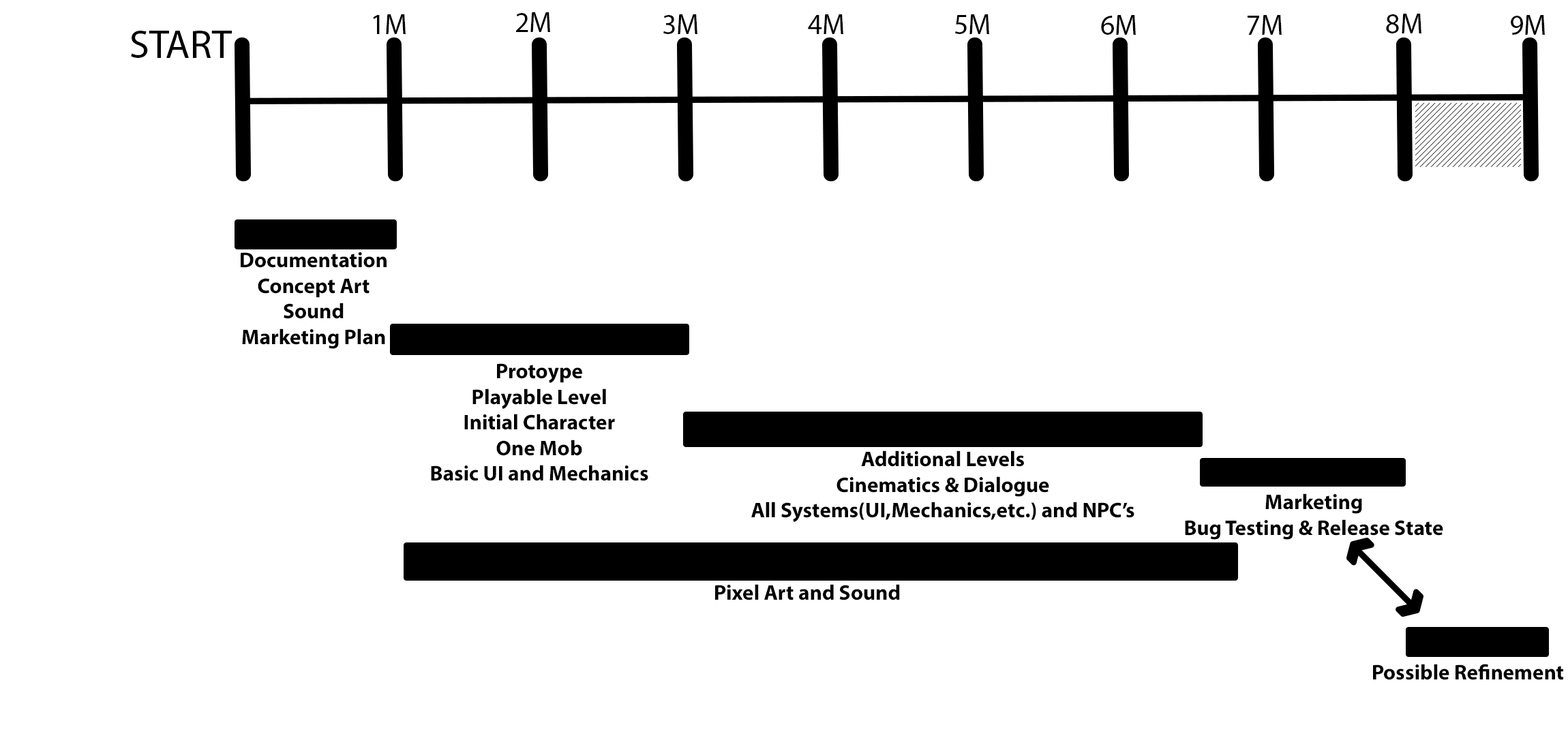
<style>
.page{position:relative;width:1568px;height:736px;background:#ffffff}
.page>*{position:absolute;margin:0}
.t1{font:28.4px "MyriadPro-Regular";color:#000000}
.t2{font:39.8px "MyriadPro-Regular";color:#000000}
.t3{font:21.3px "MyriadPro-Bold";color:#000000}
</style>
<div class="page">
<p class="t1" style="left:373px;top:14px;width:33px;height:20px">1M</p>
<p class="t1" style="left:516px;top:12px;width:34px;height:20px">2M</p>
<p class="t1" style="left:663px;top:14px;width:34px;height:20px">3M</p>
<p class="t1" style="left:808px;top:14px;width:35px;height:20px">4M</p>
<p class="t1" style="left:955px;top:14px;width:34px;height:20px">5M</p>
<p class="t1" style="left:1101px;top:15px;width:35px;height:20px">6M</p>
<p class="t1" style="left:1248px;top:15px;width:34px;height:20px">7M</p>
<p class="t1" style="left:1386px;top:14px;width:35px;height:19px">8M</p>
<p class="t1" style="left:1511px;top:15px;width:34px;height:20px">9M</p>
<p class="t2" style="left:131px;top:31px;width:101px;height:27px">START</p>
<p class="t3" style="left:241px;top:252px;width:146px;height:97px;text-align:center">Documentation<br>Concept Art<br>Sound<br>Marketing Plan</p>
<p class="t3" style="left:431px;top:363px;width:217px;height:118px;text-align:center">Protoype<br>Playable Level<br>Initial Character<br>One Mob<br>Basic UI and Mechanics</p>
<p class="t3" style="left:751px;top:451px;width:383px;height:71px;text-align:center">Additional Levels<br>Cinematics &amp; Dialogue<br>All Systems(UI,Mechanics,etc.) and NPC’s</p>
<p class="t3" style="left:1185px;top:494px;width:258px;height:46px;text-align:center">Marketing<br>Bug Testing &amp; Release State</p>
<p class="t3" style="left:715px;top:584px;width:185px;height:17px">Pixel Art and Sound</p>
<p class="t3" style="left:1373px;top:664px;width:190px;height:16px">Possible Refinement</p>
</div>
